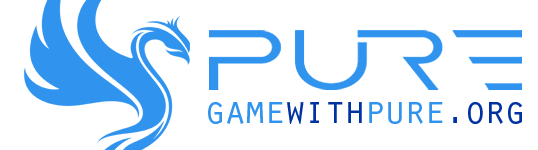
<style>
.page{position:relative;width:538px;height:150px;background:#ffffff}
.page>*{position:absolute;margin:0}
.t1{font:40px "OratorStd";letter-spacing:-0.1em;color:#3094ef}
.t2{font:40px "OratorStd";letter-spacing:-0.1em;color:#0033a1}
</style>
<div class="page">
<p class="t1" style="left:208px;top:102px;width:315px;height:22px">game<span class="t2">with</span>pure<span class="t2">.org</span></p>
</div>
